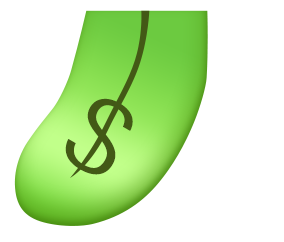
<style>
.page{position:relative;width:284px;height:242px;background:#ffffff}
.page>*{position:absolute;margin:0}
.t1{font:110px "AcuminConcept-CondensedLight";letter-spacing:0.025em;color:#435916;text-transform:uppercase;scale:1.3 1}
</style>
<div class="page">
<p class="t1" style="left:65px;top:98px;width:68px;height:77px;rotate:30deg">S</p>
</div>
